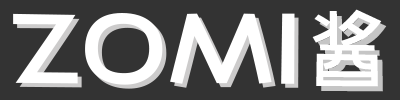
<style>
.page{position:relative;width:400px;height:100px;background:#333333}
.page>*{position:absolute;margin:0}
.t1{font:126.7px "GEETYPE-SkyGB-Flash-Medium";letter-spacing:-0.075em;color:#ffffff;scale:1.2 1}
.t2{font:126.7px "GEETYPE-SkyGB-Flash-Medium";letter-spacing:-0.075em;scale:1.2 1}
.t3{font:74.3px "GEETYPE-SkyGB-Flash-Medium";color:#ffffff;scale:1.2 1}
.t4{font:74.3px "GEETYPE-SkyGB-Flash-Medium";scale:1.2 1}
</style>
<div class="page">
<p class="t1" style="left:13px;top:13px;width:282px;height:72px">ZOMI</p>
<p class="t2" style="left:17px;top:17px;width:282px;height:72px">ZOMI</p>
<p class="t3" style="left:312px;top:9px;width:70px;height:78px">酱</p>
<p class="t4" style="left:317px;top:14px;width:70px;height:78px">酱</p>
</div>
